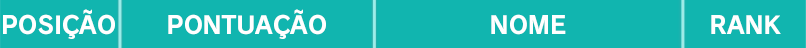
<style>
.page{position:relative;width:806px;height:48px;background:#11b5af}
.page>*{position:absolute;margin:0}
.t1{font:24px "RodinPro-B";color:#ffffff}
</style>
<div class="page">
<p class="t1" style="left:3px;top:9px;width:112px;height:30px">POSIÇÃO</p>
<p class="t1" style="left:168px;top:9px;width:158px;height:30px">PONTUAÇÃO</p>
<p class="t1" style="left:491px;top:14px;width:75px;height:21px">NOME</p>
<p class="t1" style="left:711px;top:15px;width:70px;height:19px">RANK</p>
</div>
